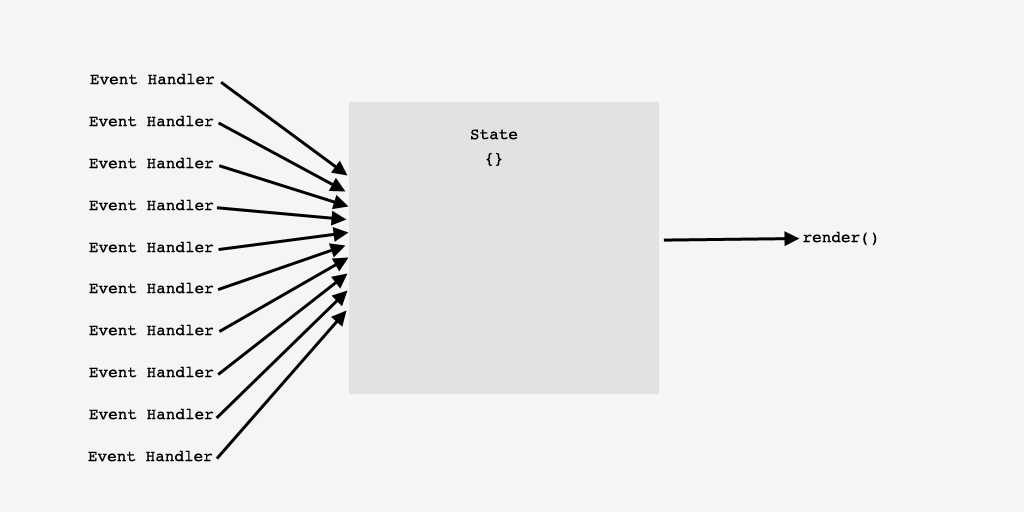
<style>
.page{position:relative;width:1024px;height:512px;background:#f5f5f5}
.page>*{position:absolute;margin:0}
.t1{font:16px "Courier";color:#000000}
.t2{font:16px/24px "Courier";color:#000000}
</style>
<div class="page">
<p class="t1" style="left:90px;top:73px;width:125px;height:12px">Event Handler</p>
<p class="t1" style="left:89px;top:115px;width:125px;height:12px">Event Handler</p>
<p class="t2" style="left:471px;top:129px;width:47px;height:37px;text-align:center">State<br>{}</p>
<p class="t1" style="left:89px;top:157px;width:125px;height:12px">Event Handler</p>
<p class="t1" style="left:89px;top:199px;width:125px;height:12px">Event Handler</p>
<p class="t1" style="left:803px;top:231px;width:74px;height:15px">render()</p>
<p class="t1" style="left:89px;top:241px;width:125px;height:12px">Event Handler</p>
<p class="t1" style="left:89px;top:282px;width:125px;height:12px">Event Handler</p>
<p class="t1" style="left:89px;top:324px;width:125px;height:12px">Event Handler</p>
<p class="t1" style="left:89px;top:366px;width:125px;height:12px">Event Handler</p>
<p class="t1" style="left:89px;top:408px;width:125px;height:12px">Event Handler</p>
<p class="t1" style="left:88px;top:450px;width:125px;height:12px">Event Handler</p>
</div>
